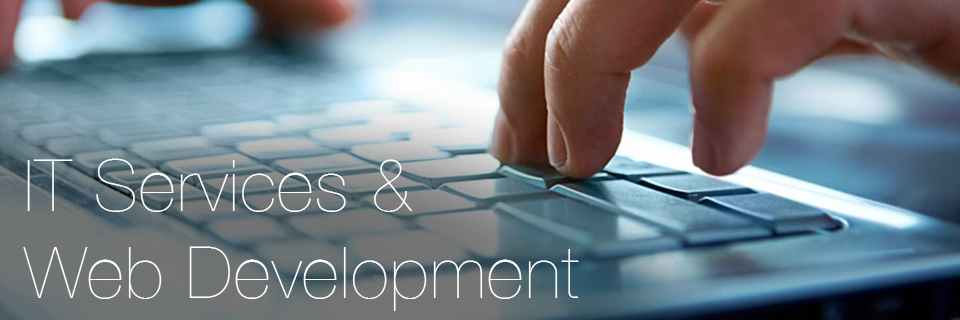
<style>
.page{position:relative;width:960px;height:320px}
.page>*{position:absolute;margin:0}
.t1{font:72px "HelveticaNeue-UltraLight";letter-spacing:0.02em;color:#ffffff}
</style>
<div class="page">
<p class="t1" style="left:23px;top:158px;width:556px;height:153px">IT Services &amp;<br>Web Development</p>
</div>
